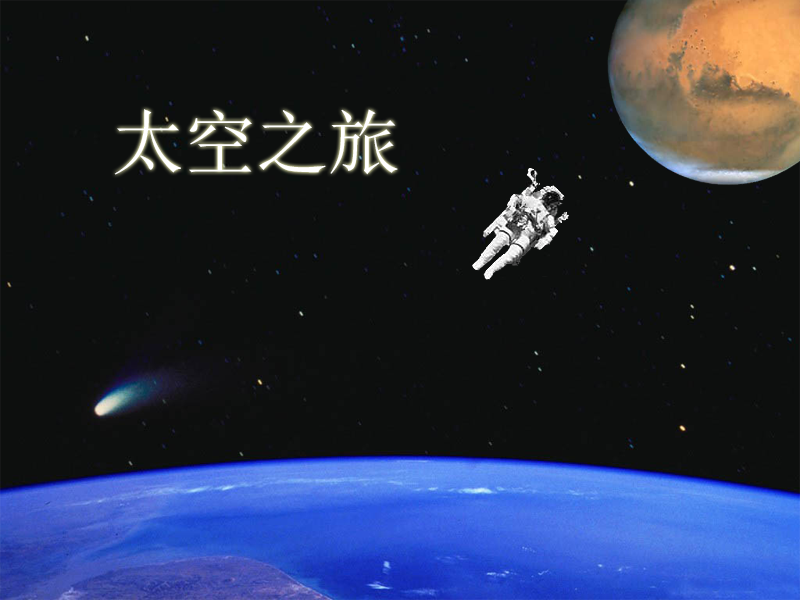
<style>
.page{position:relative;width:800px;height:600px;background:#0d0f0e}
.page>*{position:absolute;margin:0}
.t1{font:72px "SimSun";color:#ffffff}
</style>
<div class="page">
<p class="t1" style="left:114px;top:109px;width:284px;height:66px">太空之旅</p>
</div>
